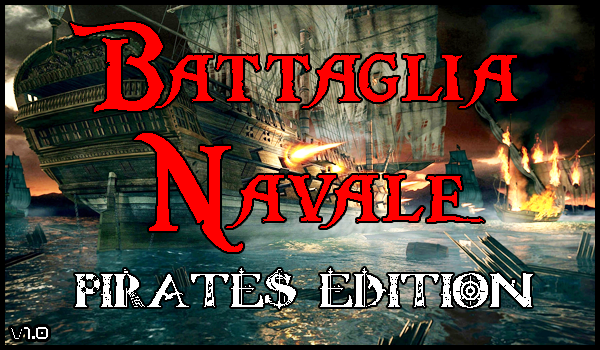
<style>
.page{position:relative;width:600px;height:350px}
.page>*{position:absolute;margin:0}
.t1{font:130px/120px "PiecesofEight";color:#ff0000}
.t2{font:50px "ManicSea-Regular";color:#ffffff}
.t3{font:20px "01Digitall";color:#ffffff}
</style>
<div class="page">
<p class="t1" style="left:70px;top:22px;width:448px;height:230px;text-align:center">Battaglia<br>Navale</p>
<p class="t2" style="left:75px;top:268px;width:458px;height:41px">PIRATES EDITION</p>
<p class="t3" style="left:11px;top:327px;width:37px;height:12px">v1.0</p>
</div>
